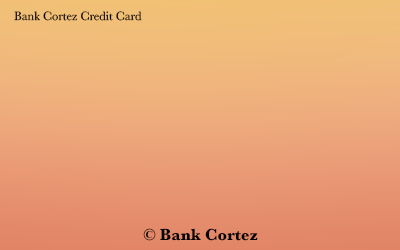
<style>
.page{position:relative;width:400px;height:250px}
.page>*{position:absolute;margin:0}
.t1{font:12.5px "Baskerville";color:#010101}
.t2{font:16.7px "Baskerville-Bold";color:#010101}
</style>
<div class="page">
<p class="t1" style="left:14px;top:11px;width:128px;height:10px">Bank Cortez Credit Card</p>
<p class="t2" style="left:143px;top:228px;width:115px;height:13px">© Bank Cortez</p>
</div>
